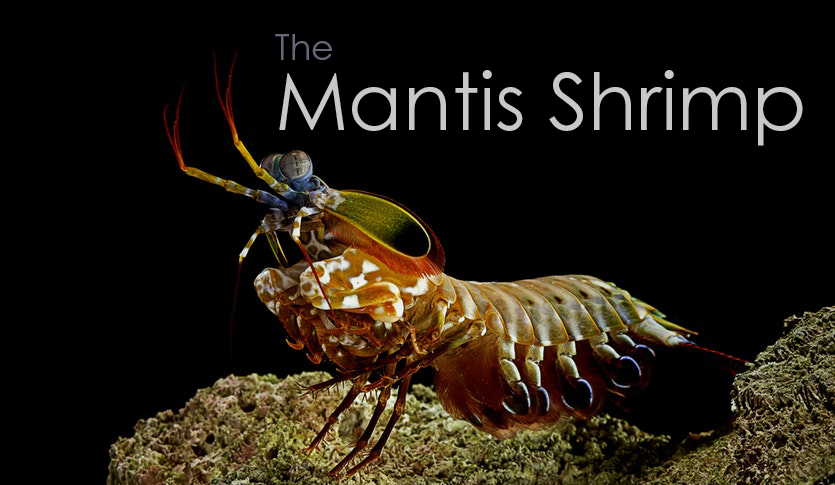
<style>
.page{position:relative;width:835px;height:485px;background:#000000}
.page>*{position:absolute;margin:0}
.t1{font:35px "CenturyGothicPro";color:#6c6479}
.t2{font:80px "CenturyGothicPro";color:#c8c8c8}
</style>
<div class="page">
<p class="t1" style="left:275px;top:34px;width:57px;height:26px">The</p>
<p class="t2" style="left:279px;top:70px;width:524px;height:76px">Mantis Shrimp</p>
</div>
